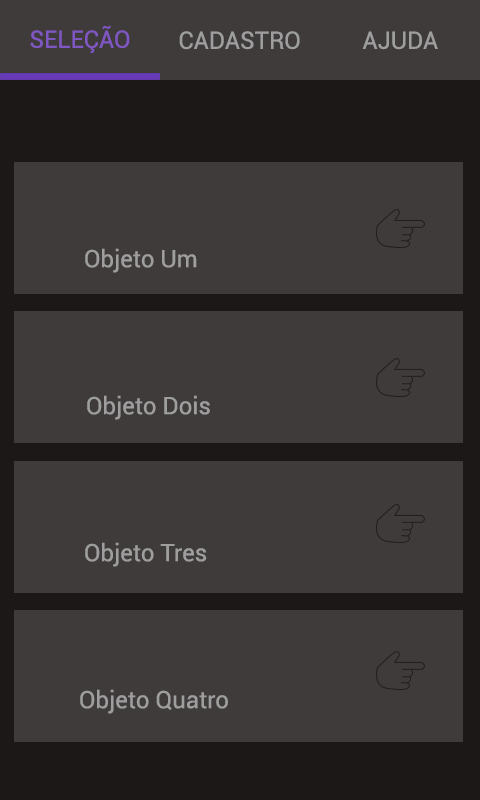
<style>
.page{position:relative;width:480px;height:800px;background:#3f3b3b}
.page>*{position:absolute;margin:0}
.t1{font:24px "Roboto-Regular";color:#7e57c2}
.t2{font:24px "Roboto-Regular";color:#9e9e9e}
</style>
<div class="page">
<p class="t1" style="left:30px;top:25px;width:100px;height:28px">SELEÇÃO</p>
<p class="t2" style="left:179px;top:31px;width:121px;height:19px">CADASTRO</p>
<p class="t2" style="left:362px;top:31px;width:76px;height:19px">AJUDA</p>
<p class="t2" style="left:85px;top:248px;width:112px;height:25px">Objeto Um</p>
<p class="t2" style="left:87px;top:395px;width:123px;height:25px">Objeto Dois</p>
<p class="t2" style="left:85px;top:542px;width:122px;height:25px">Objeto Tres</p>
<p class="t2" style="left:80px;top:689px;width:148px;height:25px">Objeto Quatro</p>
</div>
